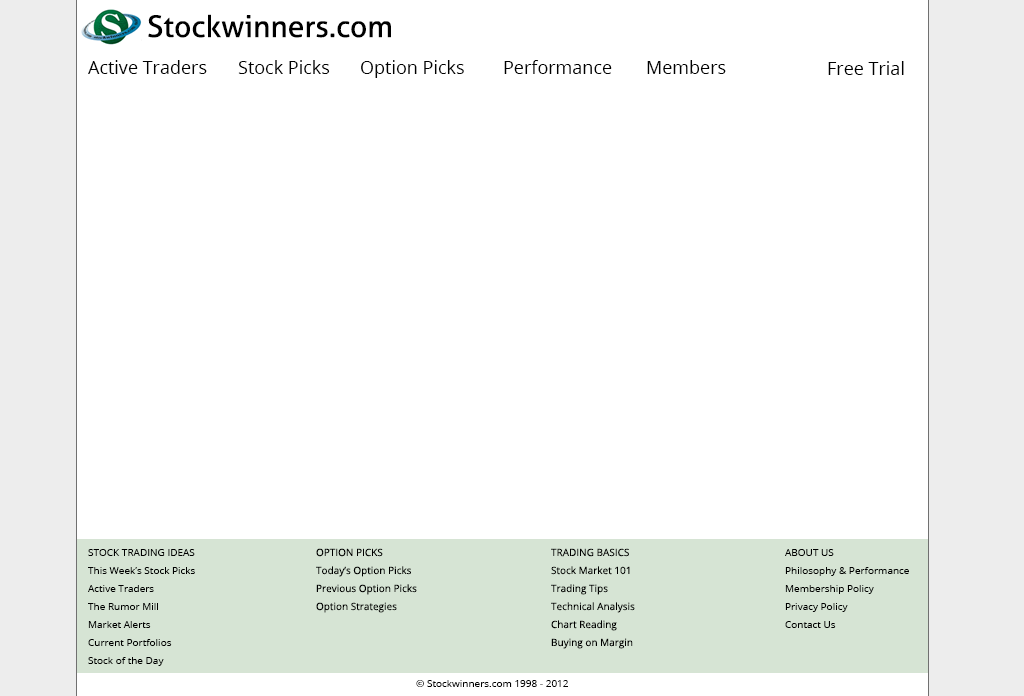
<style>
.page{position:relative;width:1024px;height:696px;background:#ffffff}
.page>*{position:absolute;margin:0}
.t1{font:30px "Aller";color:#000000}
.t2{font:18px "OpenSans";color:#000000}
.t3{font:10px/18px "OpenSans";color:#000000}
.t4{font:10px "OpenSans";color:#000000}
</style>
<div class="page">
<p class="t1" style="left:148px;top:14px;width:243px;height:24px">Stockwinners.com</p>
<p class="t2" style="left:88px;top:60px;width:119px;height:14px">Active Traders</p>
<p class="t2" style="left:238px;top:60px;width:92px;height:14px">Stock Picks</p>
<p class="t2" style="left:361px;top:60px;width:103px;height:18px">Option Picks</p>
<p class="t2" style="left:504px;top:60px;width:108px;height:14px">Performance</p>
<p class="t2" style="left:647px;top:60px;width:79px;height:14px">Members</p>
<p class="t2" style="left:828px;top:61px;width:76px;height:14px">Free Trial</p>
<p class="t3" style="left:88px;top:549px;width:107px;height:117px">STOCK TRADING IDEAS<br>This Week’s Stock Picks<br>Active Traders<br>The Rumor Mill<br>Market Alerts<br>Current Portfolios<br>Stock of the Day</p>
<p class="t3" style="left:316px;top:548px;width:101px;height:65px">OPTION PICKS<br>Today’s Option Picks<br>Previous Option Picks<br>Option Strategies</p>
<p class="t3" style="left:551px;top:548px;width:84px;height:101px">TRADING BASICS<br>Stock Market 101<br>Trading Tips<br>Technical Analysis<br>Chart Reading<br>Buying on Margin</p>
<p class="t3" style="left:785px;top:549px;width:124px;height:79px">ABOUT US<br>Philosophy &amp; Performance<br>Membership Policy<br>Privacy Policy<br>Contact Us</p>
<p class="t4" style="left:416px;top:680px;width:152px;height:7px">© Stockwinners.com 1998 - 2012</p>
</div>
